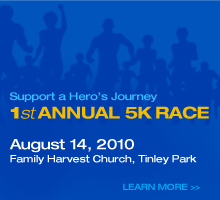
<style>
.page{position:relative;width:220px;height:200px}
.page>*{position:absolute;margin:0}
.t1{font:10.6px/12.6px "HelveticaNeueLTStd-MdEx";letter-spacing:-0.025em;color:#38bcff}
.t2{font:16.5px/12.6px "HelveticaNeueLTStd-BlkEx";letter-spacing:-0.025em;color:#f4bc00}
.t3{font:16.5px/12.6px "HelveticaNeueLTStd-LtExO";letter-spacing:-0.025em;color:#f4bc00}
.t4{font:16.5px/12.6px "HelveticaNeueLTStd-BdEx";letter-spacing:-0.025em;color:#f4bc00;text-transform:uppercase}
.t5{font:9.9px/6.1px "HelveticaNeueLTStd-MdEx";letter-spacing:-0.025em;color:#fefefe}
.t6{font:14.5px/6.1px "HelveticaNeueLTStd-MdEx";letter-spacing:-0.025em;color:#fefcfc}
.t7{font:8.6px "HelveticaNeueLTStd-MdEx";letter-spacing:-0.025em;color:#00aaf7}
</style>
<div class="page">
<p class="t1" style="left:9px;top:92px;width:200px;height:27px">Support a Hero’s Journey<br><span class="t2">1</span><span class="t3">st </span><span class="t4">Annual 5K Race</span></p>
<p class="t5" style="left:9px;top:139px;width:188px;height:26px"><span class="t6">August 14, 2010 <br></span>Family Harvest Church, Tinley Park</p>
<p class="t7" style="left:123px;top:183px;width:77px;height:7px">LEARN MORE &gt;&gt;</p>
</div>
